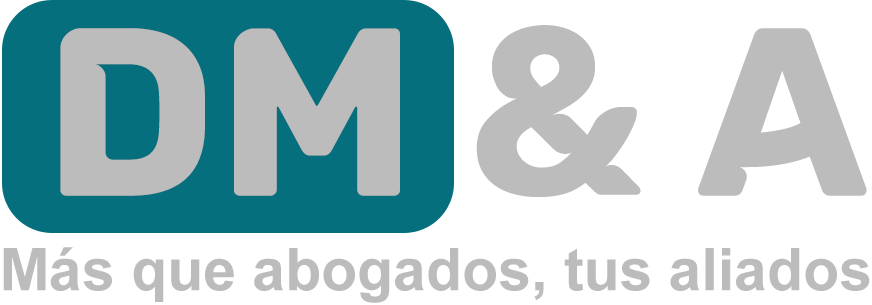
<style>
.page{position:relative;width:872px;height:305px;background:#ffffff}
.page>*{position:absolute;margin:0}
.t1{font:59px "Arial-BoldMT";color:#bcbcbc}
</style>
<div class="page">
<p class="t1" style="left:3px;top:247px;width:867px;height:56px">Más que abogados, tus aliados</p>
</div>
